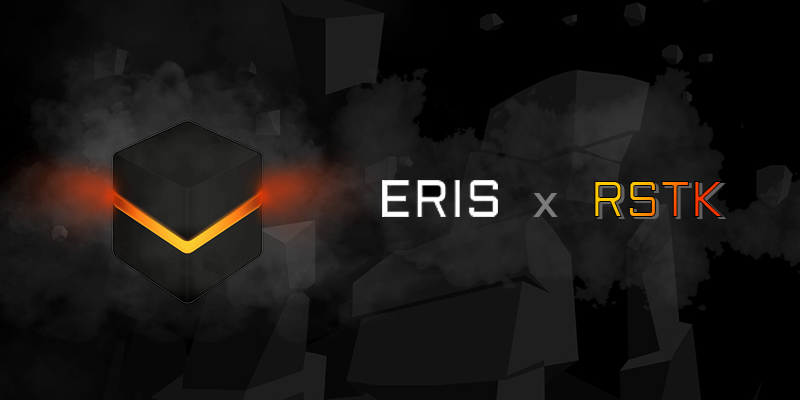
<style>
.page{position:relative;width:800px;height:400px}
.page>*{position:absolute;margin:0}
.t1{font:52.2px "Aldrich-Regular";scale:0.93 1}
.t2{font:47.3px "Aldrich-Regular";color:#7b7b7b}
</style>
<div class="page">
<p class="t1" style="left:594px;top:181px;width:130px;height:36px">RSTK</p>
<p class="t2" style="left:533px;top:193px;width:25px;height:24px">x</p>
</div>
